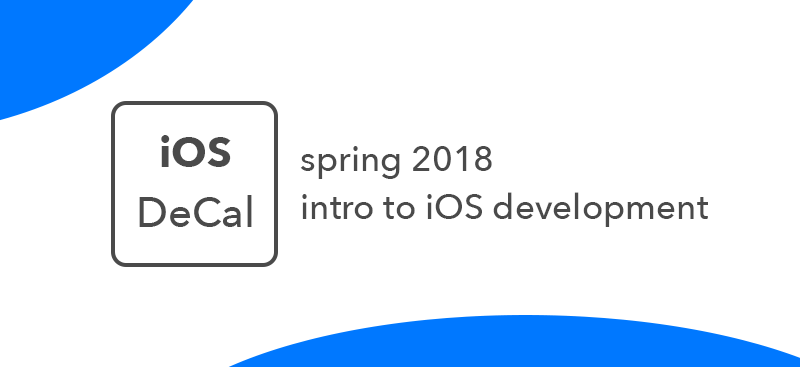
<style>
.page{position:relative;width:800px;height:367px;background:#ffffff}
.page>*{position:absolute;margin:0}
.t1{font:42px/60px "AvenirNextLTPro-Medium";color:#4a4a4a}
.t2{font:42px/60px "AvenirNextLTPro-Bold";color:#4a4a4a}
.t3{font:35px/48px "AvenirNextLTPro-Medium";color:#4a4a4a}
</style>
<div class="page">
<p class="t1" style="left:139px;top:135px;width:113px;height:92px;text-align:center"><span class="t2">iOS<br></span>DeCal</p>
<p class="t3" style="left:300px;top:146px;width:408px;height:81px">spring 2018<br>intro to iOS development</p>
</div>
